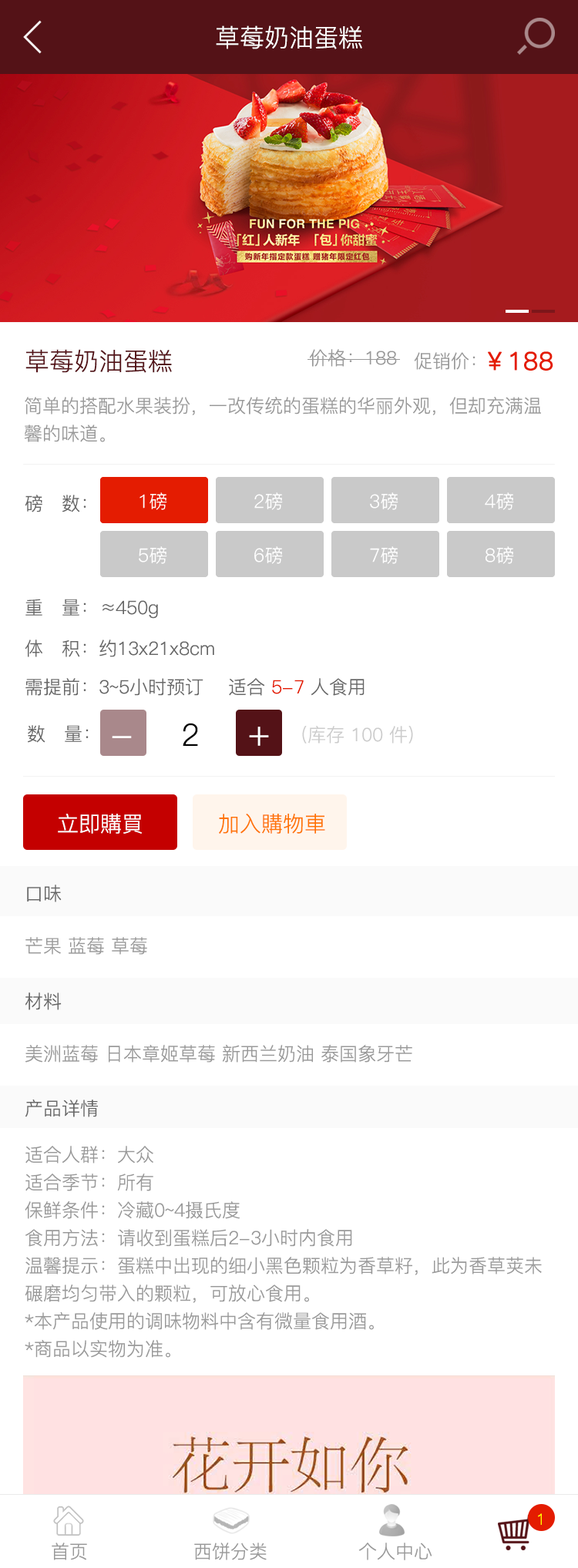
<style>
.page{position:relative;width:578px;height:1568px;background:#ffffff}
.page>*{position:absolute;margin:0}
.t1{font:24.7px "PingFang-SC-Regular";color:#ffffff}
.t2{font:24.7px "PingFang-SC-Regular";color:#541217}
.t3{font:18.5px "PingFang-SC-Regular";color:#999999}
.t4{font:24.7px "PingFang-SC-Regular";color:#e41c01;font-weight:bold}
.t5{font:18.5px/27.7px "PingFang-SC-Regular";color:#999999}
.t6{font:18.5px "PingFang-SC-Regular";color:#666666}
.t7{font:18.5px "PingFang-SC-Regular";color:#e41c01}
.t8{font:30.8px "PingFang-SC-Regular";color:#000000}
.t9{font:18.5px "PingFang-SC-Regular";color:#cccccc}
.t10{font:37px "PingFang-SC-Regular";color:#ffffff}
.t11{font:21.6px "PingFang-SC-Regular";color:#ffffff}
.t12{font:21.6px "PingFang-SC-Regular";color:#ff7300}
.t13{font:15.4px "PingFang-SC-Regular";color:#ffff00}
</style>
<div class="page">
<p class="t1" style="left:216px;top:25px;width:146px;height:24px">草莓奶油蛋糕</p>
<p class="t2" style="left:25px;top:349px;width:147px;height:24px">草莓奶油蛋糕</p>
<p class="t3" style="left:309px;top:349px;width:88px;height:18px">价格：188</p>
<p class="t3" style="left:414px;top:352px;width:61px;height:18px">促销价：</p>
<p class="t4" style="left:488px;top:351px;width:65px;height:20px">￥188</p>
<p class="t5" style="left:24px;top:397px;width:517px;height:45px">简单的搭配水果装扮，一改传统的蛋糕的华丽外观，但却充满温馨的味道。</p>
<p class="t6" style="left:25px;top:495px;width:61px;height:17px">磅   数：</p>
<p class="t6" style="left:25px;top:599px;width:61px;height:17px">重   量：</p>
<p class="t6" style="left:102px;top:600px;width:56px;height:19px">≈450g</p>
<p class="t6" style="left:25px;top:640px;width:61px;height:17px">体   积：</p>
<p class="t6" style="left:99px;top:640px;width:115px;height:17px">约13x21x8cm</p>
<p class="t6" style="left:25px;top:678px;width:61px;height:18px">需提前：</p>
<p class="t6" style="left:99px;top:678px;width:265px;height:18px">3~5小时预订    适合 <span class="t7">5-7</span> 人食用</p>
<p class="t6" style="left:28px;top:725px;width:61px;height:18px">数   量：</p>
<p class="t8" style="left:183px;top:723px;width:15px;height:23px">2</p>
<p class="t9" style="left:302px;top:726px;width:111px;height:18px">(库存 100 件)</p>
<p class="t10" style="left:112px;top:736px;width:20px;height:2px">-</p>
<p class="t10" style="left:249px;top:727px;width:20px;height:19px">+</p>
<p class="t11" style="left:58px;top:814px;width:84px;height:20px">立即購買</p>
<p class="t12" style="left:219px;top:814px;width:106px;height:20px">加入購物車</p>
<p class="t6" style="left:27px;top:885px;width:35px;height:17px">口味</p>
<p class="t3" style="left:25px;top:937px;width:122px;height:18px">芒果 蓝莓 草莓</p>
<p class="t6" style="left:25px;top:992px;width:37px;height:18px">材料</p>
<p class="t3" style="left:25px;top:1045px;width:387px;height:18px">美洲蓝莓 日本章姬草莓 新西兰奶油 泰国象牙芒</p>
<p class="t6" style="left:25px;top:1100px;width:73px;height:17px">产品详情</p>
<p class="t5" style="left:25px;top:1146px;width:517px;height:212px">适合人群：大众<br>适合季节：所有<br>保鲜条件：冷藏0~4摄氏度<br>食用方法：请收到蛋糕后2-3小时内食用<br>温馨提示：蛋糕中出现的细小黑色颗粒为香草籽，此为香草荚未碾磨均匀带入的颗粒，可放心食用。<br>*本产品使用的调味物料中含有微量食用酒。<br>*商品以实物为准。</p>
<p class="t13" style="left:538px;top:1513px;width:4px;height:12px">1</p>
<p class="t3" style="left:52px;top:1543px;width:35px;height:17px">首页</p>
<p class="t3" style="left:194px;top:1543px;width:73px;height:17px">西饼分类</p>
<p class="t3" style="left:358px;top:1543px;width:74px;height:17px">个人中心</p>
</div>
